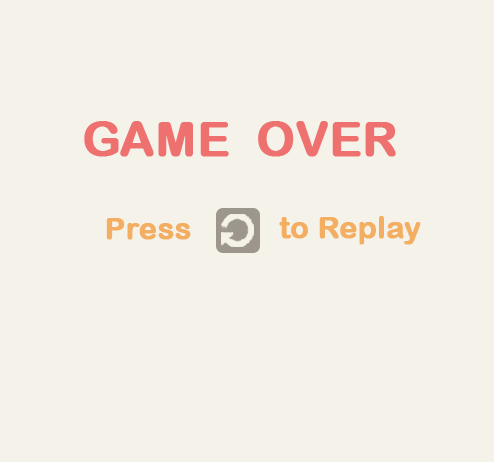
<style>
.page{position:relative;width:494px;height:462px;background:#f4f2e9}
.page>*{position:absolute;margin:0}
.t1{font:48px "ArialRoundedMTBold";color:#ee706f;font-weight:bold}
.t2{font:30px "ArialRoundedMTBold";color:#f4ae62;font-weight:bold}
</style>
<div class="page">
<p class="t1" style="left:84px;top:121px;width:312px;height:36px">GAME  OVER</p>
<p class="t2" style="left:106px;top:218px;width:85px;height:22px">Press</p>
<p class="t2" style="left:279px;top:216px;width:142px;height:29px">to Replay</p>
</div>
